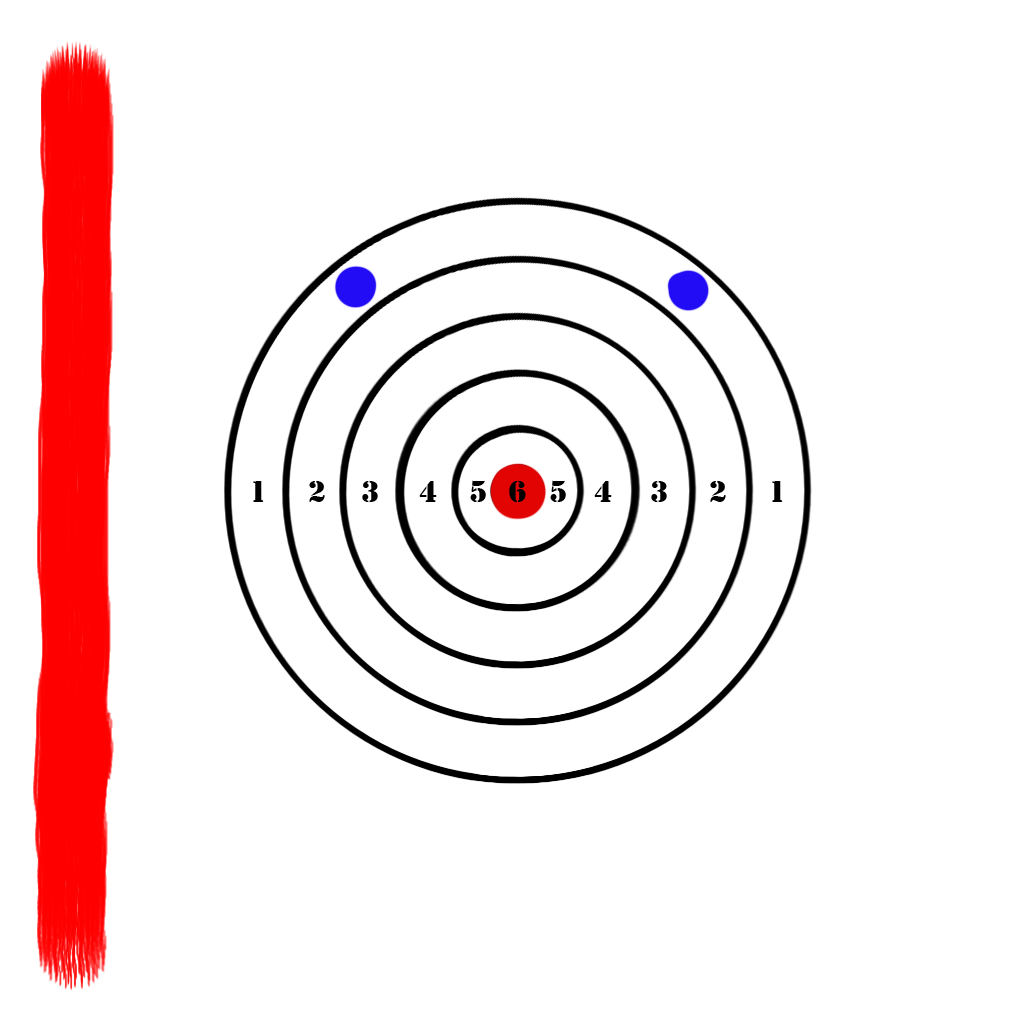
<style>
.page{position:relative;width:1024px;height:1024px;background:#ffffff}
.page>*{position:absolute;margin:0}
.t1{font:32px "Stencil";color:#000000}
</style>
<div class="page">
<p class="t1" style="left:253px;top:481px;width:11px;height:21px">1</p>
<p class="t1" style="left:309px;top:480px;width:16px;height:22px">2</p>
<p class="t1" style="left:362px;top:480px;width:16px;height:23px">3</p>
<p class="t1" style="left:419px;top:481px;width:18px;height:21px">4</p>
<p class="t1" style="left:470px;top:480px;width:16px;height:23px">5</p>
<p class="t1" style="left:509px;top:480px;width:17px;height:23px">6</p>
<p class="t1" style="left:550px;top:480px;width:16px;height:23px">5</p>
<p class="t1" style="left:594px;top:481px;width:18px;height:21px">4</p>
<p class="t1" style="left:651px;top:480px;width:16px;height:23px">3</p>
<p class="t1" style="left:710px;top:480px;width:16px;height:22px">2</p>
<p class="t1" style="left:772px;top:481px;width:11px;height:21px">1</p>
</div>
